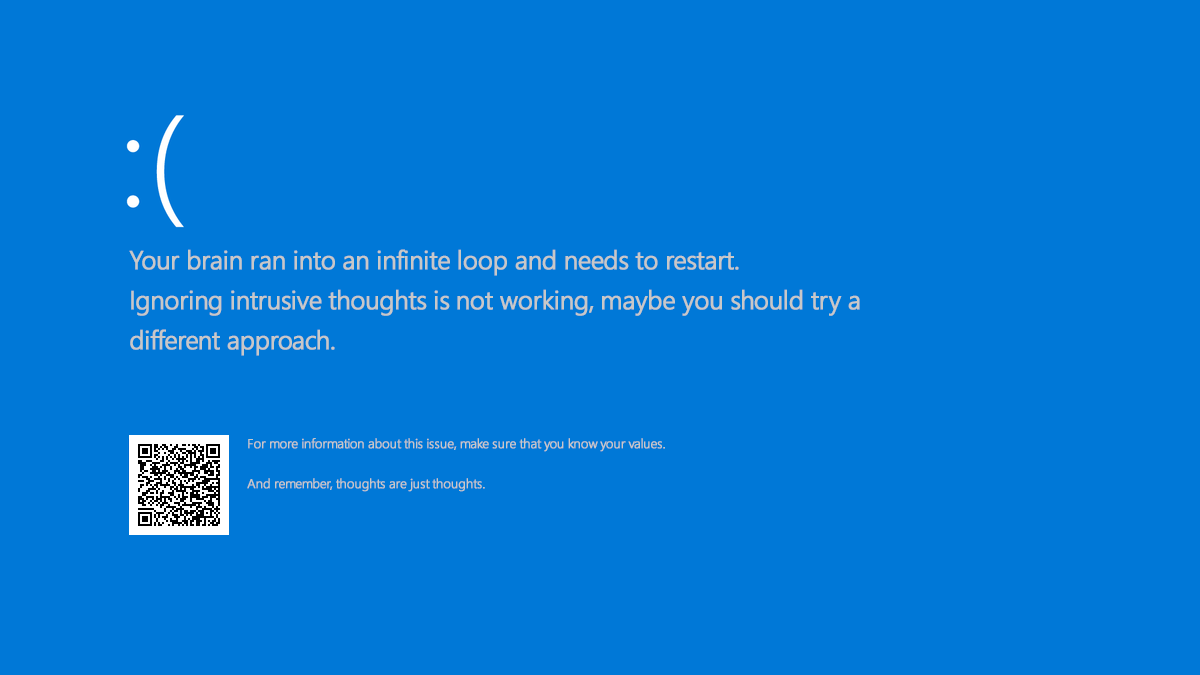
<style>
.page{position:relative;width:1200px;height:675px;background:#0078d7}
.page>*{position:absolute;margin:0}
.t1{font:26px/40px "SegoeUI-Semilight";letter-spacing:-0.04em;color:#c8c8c8;font-weight:bold}
.t2{font:13px/40px "SegoeUI-Semilight";letter-spacing:-0.04em;color:#c8c8c8;font-weight:bold}
</style>
<div class="page">
<p class="t1" style="left:129px;top:249px;width:731px;height:107px">Your brain ran into an infinite loop and needs to restart.<br>Ignoring intrusive thoughts is not working, maybe you should try a different approach.</p>
<p class="t2" style="left:247px;top:438px;width:418px;height:54px">For more information about this issue, make sure that you know your values.<br>And remember, thoughts are just thoughts.</p>
</div>
